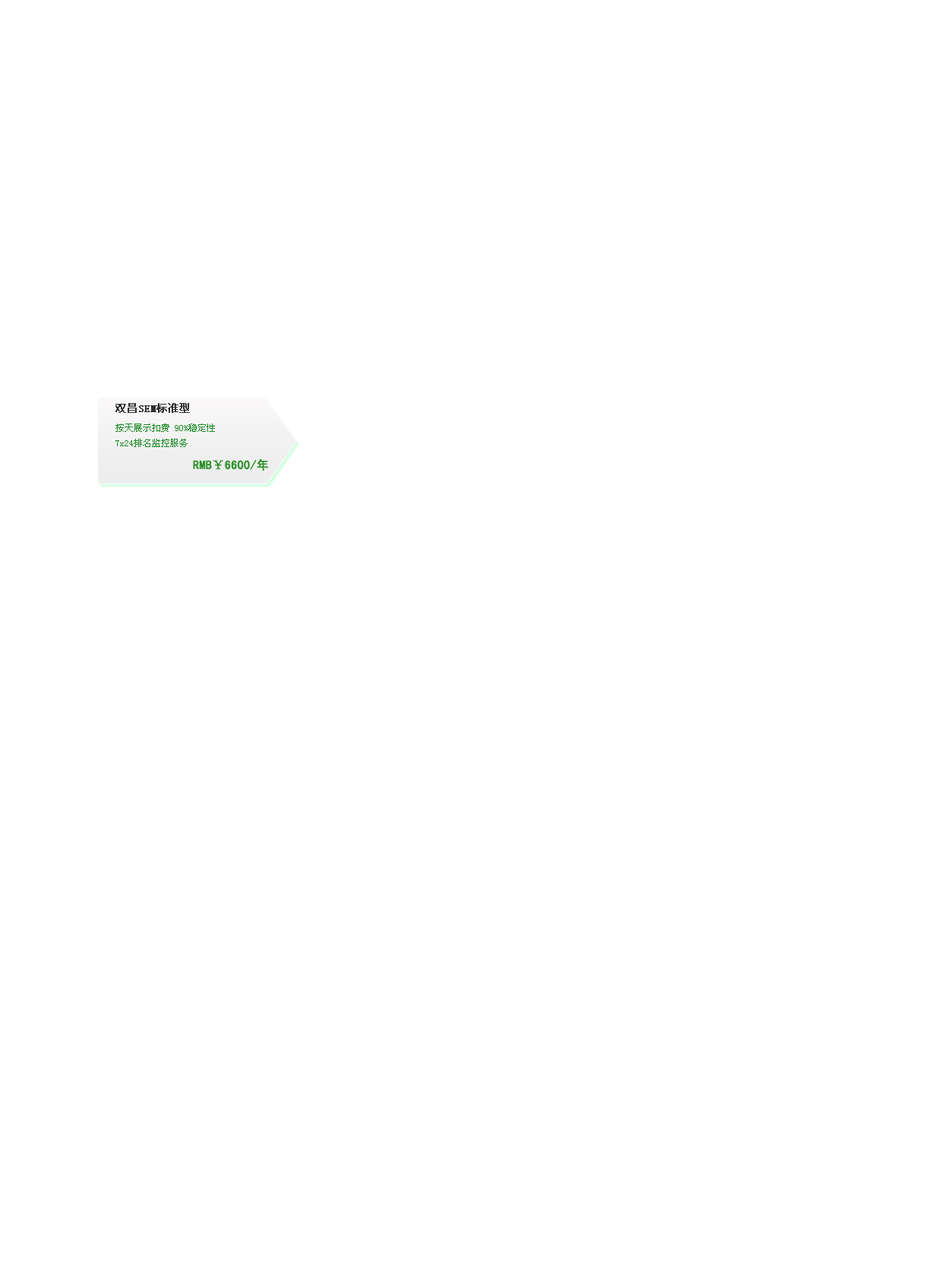
<style>
.page{position:relative;width:944px;height:1263px;background:#ffffff}
.page>*{position:absolute;margin:0}
.t1{font:10.6px "SimSun";color:#2f302f;font-weight:bold}
.t2{font:9.1px/15.2px "SimSun";color:#1b8a25}
.t3{font:12.1px "SimHei";color:#279220;font-weight:bold}
</style>
<div class="page">
<p class="t1" style="left:115px;top:403px;width:75px;height:10px">双昌SEM标准型</p>
<p class="t2" style="left:115px;top:424px;width:100px;height:23px">按天展示扣费 90%稳定性 <br>7x24排名监控服务</p>
<p class="t3" style="left:193px;top:459px;width:75px;height:12px">RMB￥6600/年</p>
</div>
